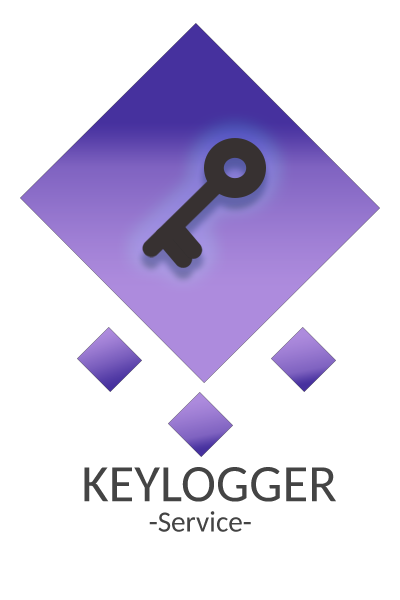
<style>
.page{position:relative;width:400px;height:600px;background:#ffffff}
.page>*{position:absolute;margin:0}
.t1{font:52.7px "Carlito";color:#444444}
.t2{font:29.2px "Carlito";color:#444444}
</style>
<div class="page">
<p class="t1" style="left:84px;top:467px;width:252px;height:35px">KEYLOGGER</p>
<p class="t2" style="left:149px;top:511px;width:102px;height:21px">-Service-</p>
</div>
